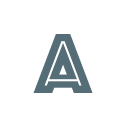
<style>
.page{position:relative;width:128px;height:128px;background:#ffffff}
.page>*{position:absolute;margin:0}
.t1{font:88px "Phosphate-Inline";color:#546d77}
</style>
<div class="page">
<p class="t1" style="left:33px;top:34px;width:60px;height:59px">A</p>
</div>
